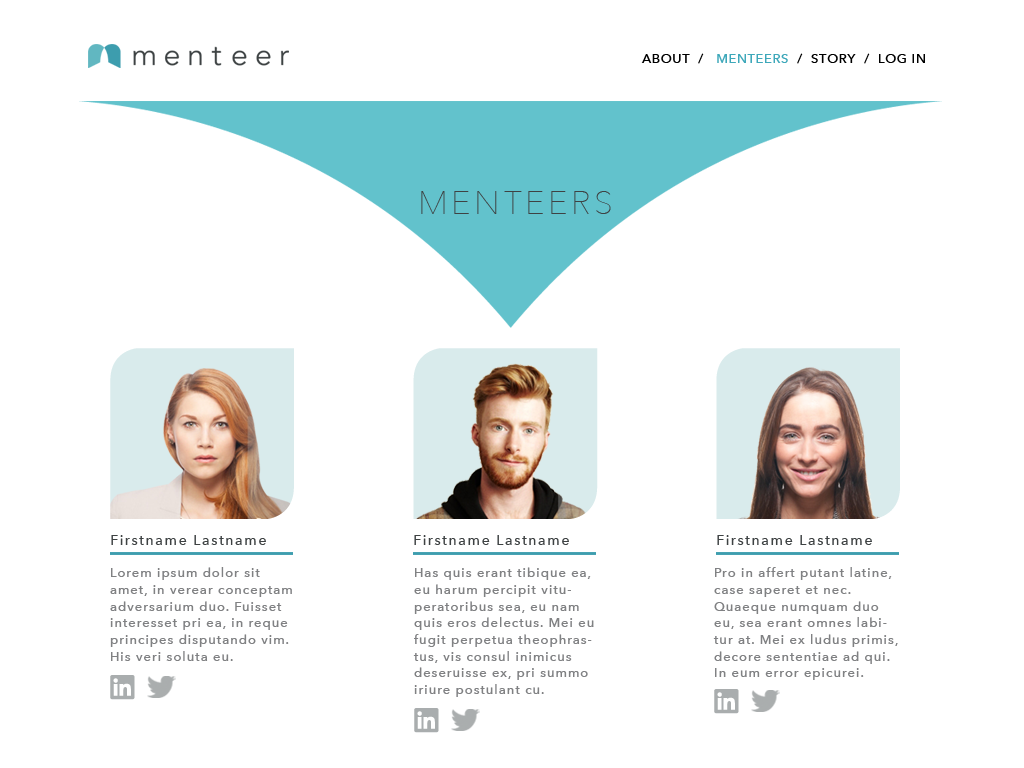
<style>
.page{position:relative;width:1024px;height:768px;background:#ffffff}
.page>*{position:absolute;margin:0}
.t1{font:12.5px "AvenirNext-Medium";letter-spacing:0.075em;color:#000000}
.t2{font:12.5px "AvenirNext-Medium";letter-spacing:0.075em;color:#3ea8ba}
.t3{font:33.3px "AvenirNext-UltraLight";letter-spacing:0.1em;color:#3e4243}
.t4{font:14.4px "AvenirNext-Medium";letter-spacing:0.1em;color:#3e4243}
.t5{font:12.5px/16.7px "AvenirNext-Medium";letter-spacing:0.1em;color:#808183}
</style>
<div class="page">
<p class="t1" style="left:641px;top:53px;width:284px;height:11px">ABOUT  /   <span class="t2">MENTEERS</span>  /  STORY  /  LOG IN</p>
<p class="t3" style="left:421px;top:191px;width:190px;height:23px">MENTEERS</p>
<p class="t4" style="left:111px;top:535px;width:155px;height:10px">Firstname Lastname</p>
<p class="t4" style="left:414px;top:535px;width:155px;height:10px">Firstname Lastname</p>
<p class="t4" style="left:717px;top:535px;width:155px;height:10px">Firstname Lastname</p>
<p class="t5" style="left:110px;top:567px;width:182px;height:94px">Lorem ipsum dolor sit amet, in verear conceptam adversarium duo. Fuisset interesset pri ea, in reque principes disputando vim. His veri soluta eu.</p>
<p class="t5" style="left:413px;top:567px;width:181px;height:130px">Has quis erant tibique ea, eu harum percipit vituperatoribus sea, eu nam quis eros delectus. Mei eu fugit perpetua theophrastus, vis consul inimicus deseruisse ex, pri summo iriure postulant cu.</p>
<p class="t5" style="left:713px;top:567px;width:185px;height:113px">Pro in affert putant latine, case saperet et nec. Quaeque numquam duo eu, sea erant omnes labitur at. Mei ex ludus primis, decore sententiae ad qui. In eum error epicurei.</p>
</div>
